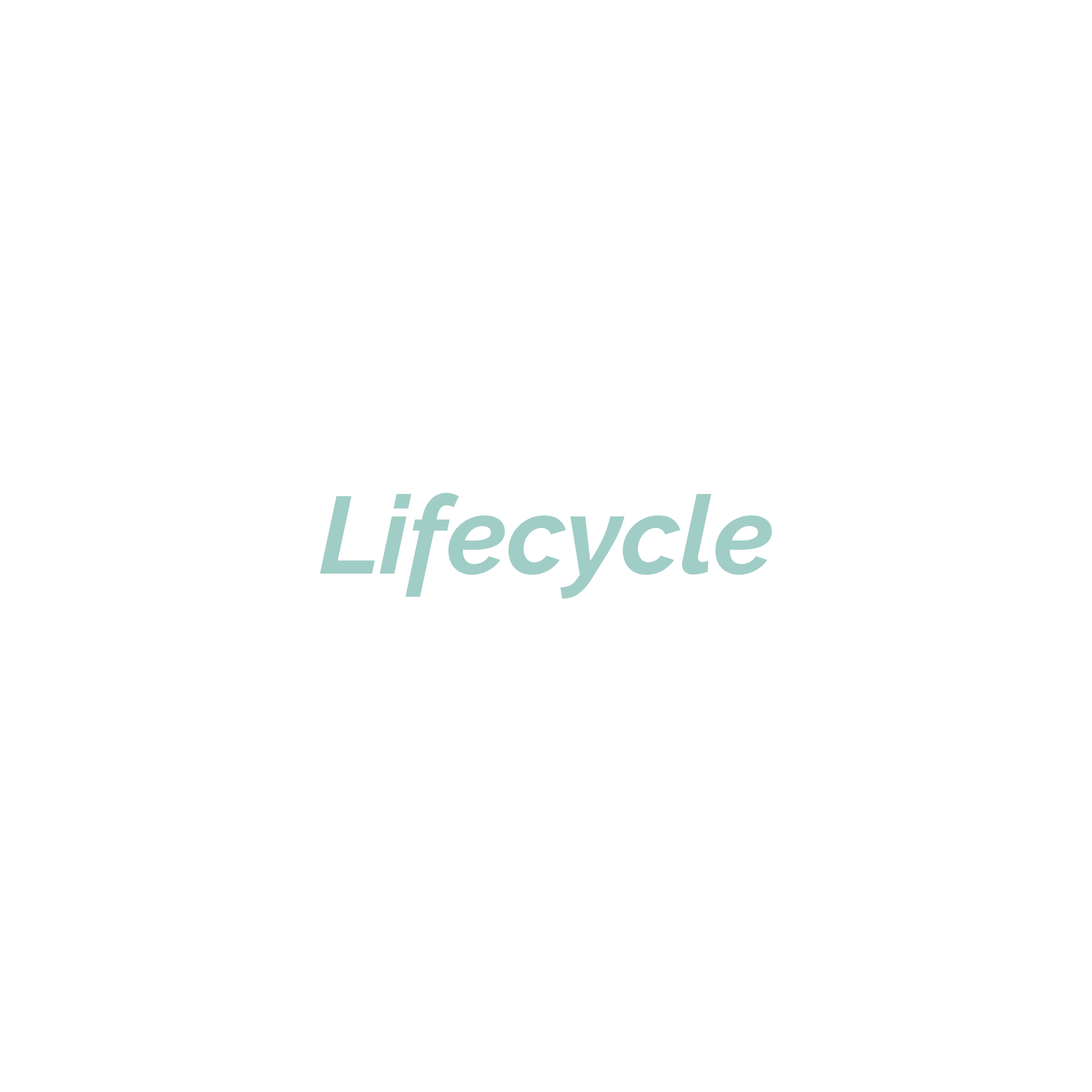
<style>
.page{position:relative;width:1092px;height:1092px;background:#ffffff}
.page>*{position:absolute;margin:0}
.t1{font:109.2px "Raleway-BoldItalic";color:#a1cdc7}
</style>
<div class="page">
<p class="t1" style="left:320px;top:493px;width:452px;height:106px">Lifecycle</p>
</div>
